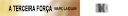
<style>
.page{position:relative;width:128px;height:16px;background:#ffffff}
.page>*{position:absolute;margin:0}
.t1{font:7.8px "Arial-BoldMT";letter-spacing:-0.02em;color:#000000;font-weight:bold;scale:0.56 1}
</style>
<div class="page">
<p class="t1" style="left:8px;top:5px;width:44px;height:8px">A TERCEIRA FORÇA</p>
</div>
